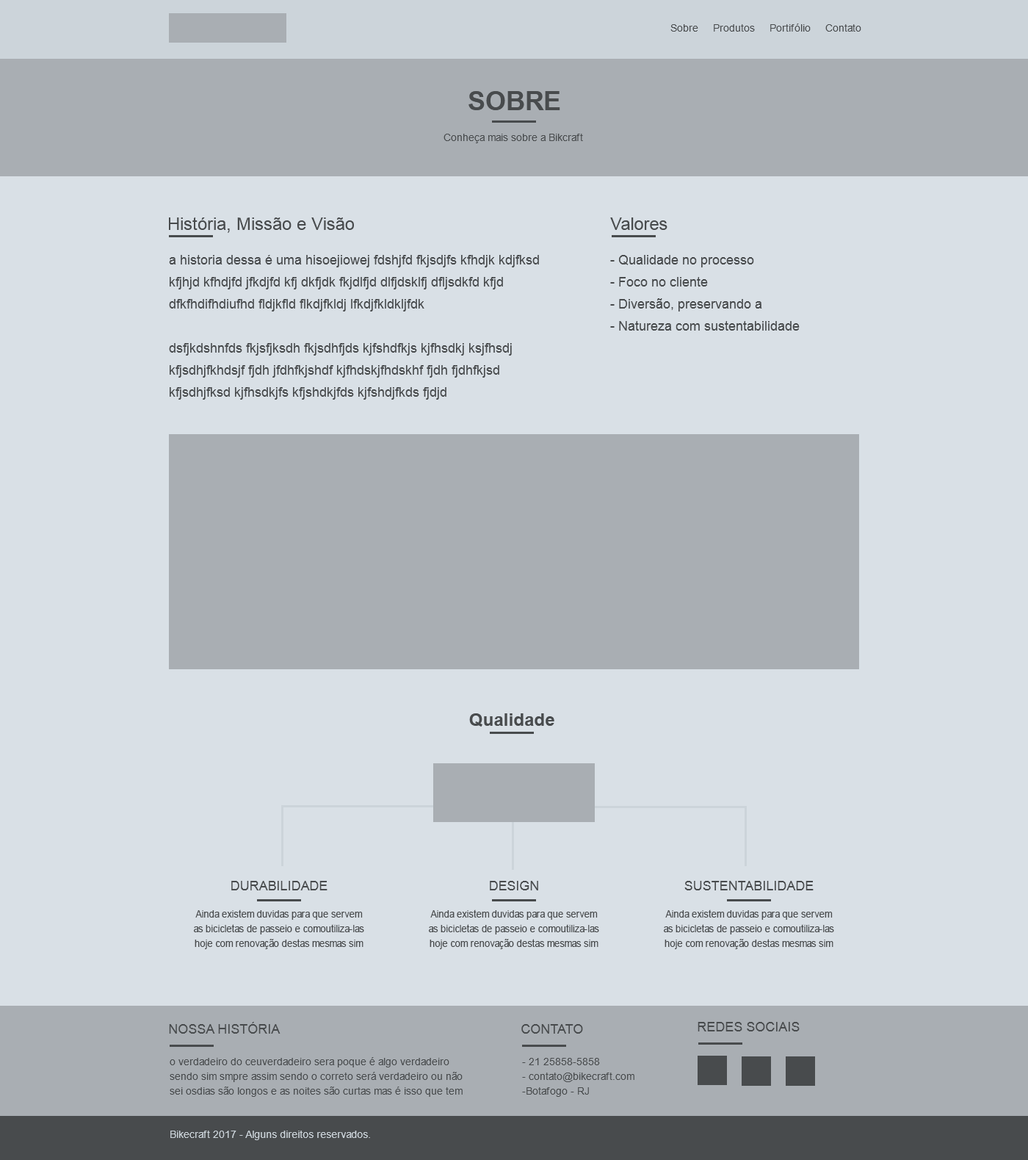
<style>
.page{position:relative;width:1028px;height:1160px;background:#d9e0e6}
.page>*{position:absolute;margin:0}
.t1{font:10.3px "ArialMT";color:#484b4d}
.t2{font:26.4px "Arial-BoldMT";color:#484b4d;text-transform:uppercase}
.t3{font:17.6px "ArialMT";color:#484b4d}
.t4{font:13.2px/22px "ArialMT";color:#484b4d}
.t5{font:17.6px "Arial-BoldMT";color:#484b4d}
.t6{font:13.2px "ArialMT";color:#484b4d}
.t7{font:10.3px/14.7px "ArialMT";color:#484b4d;scale:0.91 1}
.t8{font:13.2px "ArialMT";color:#484b4d;text-transform:uppercase}
.t9{font:10.3px/14.7px "ArialMT";color:#484b4d}
.t10{font:10.3px "ArialMT";color:#ccd4da}
</style>
<div class="page">
<p class="t1" style="left:671px;top:24px;width:191px;height:8px">Sobre     Produtos     Portifólio     Contato</p>
<p class="t2" style="left:469px;top:91px;width:91px;height:19px">SOBRE</p>
<p class="t1" style="left:444px;top:134px;width:139px;height:9px">Conheça mais sobre a Bikcraft</p>
<p class="t3" style="left:169px;top:217px;width:185px;height:16px">História, Missão e Visão</p>
<p class="t3" style="left:610px;top:217px;width:58px;height:13px">Valores</p>
<p class="t4" style="left:169px;top:255px;width:370px;height:145px">a historia dessa é uma hisoejiowej fdshjfd fkjsdjfs kfhdjk kdjfksd kfjhjd kfhdjfd jfkdjfd kfj dkfjdk fkjdlfjd dlfjdsklfj dfljsdkfd kfjd dfkfhdifhdiufhd fldjkfld flkdjfkldj lfkdjfkldkljfdk<br><br>dsfjkdshnfds fkjsfjksdh fkjsdhfjds kjfshdfkjs kjfhsdkj ksjfhsdj kfjsdhjfkhdsjf fjdh jfdhfkjshdf kjfhdskjfhdskhf fjdh fjdhfkjsd kfjsdhjfksd kjfhsdkjfs kfjshdkjfds kjfshdjfkds fjdjd</p>
<p class="t4" style="left:610px;top:255px;width:190px;height:76px">- Qualidade no processo<br>- Foco no cliente<br>- Diversão, preservando a <br>- Natureza com sustentabilidade</p>
<p class="t5" style="left:469px;top:713px;width:86px;height:13px">Qualidade</p>
<p class="t6" style="left:231px;top:881px;width:97px;height:9px">DURABILIDADE</p>
<p class="t6" style="left:490px;top:881px;width:48px;height:9px">DESIGN</p>
<p class="t6" style="left:685px;top:881px;width:129px;height:9px">SUSTENTABILIDADE</p>
<p class="t7" style="left:194px;top:909px;width:170px;height:40px;text-align:center">Ainda existem duvidas para que servem as bicicletas de passeio e comoutiliza-las hoje com renovação destas mesmas sim</p>
<p class="t7" style="left:429px;top:909px;width:170px;height:40px;text-align:center">Ainda existem duvidas para que servem as bicicletas de passeio e comoutiliza-las hoje com renovação destas mesmas sim</p>
<p class="t7" style="left:664px;top:909px;width:170px;height:40px;text-align:center">Ainda existem duvidas para que servem as bicicletas de passeio e comoutiliza-las hoje com renovação destas mesmas sim</p>
<p class="t8" style="left:169px;top:1022px;width:112px;height:11px">Nossa História</p>
<p class="t8" style="left:521px;top:1024px;width:62px;height:9px">CONTATO</p>
<p class="t8" style="left:698px;top:1022px;width:102px;height:9px">REDES SOCIAIS</p>
<p class="t9" style="left:170px;top:1057px;width:293px;height:40px">o verdadeiro do ceuverdadeiro sera poque é algo verdadeiro sendo sim smpre assim sendo o correto será verdadeiro ou não sei osdias são longos e as noites são curtas mas é isso que tem</p>
<p class="t9" style="left:522px;top:1058px;width:113px;height:39px">- 21 25858-5858<br>- contato@bikecraft.com<br>-Botafogo - RJ</p>
<p class="t10" style="left:170px;top:1130px;width:200px;height:10px">Bikecraft 2017 - Alguns direitos reservados.</p>
</div>
